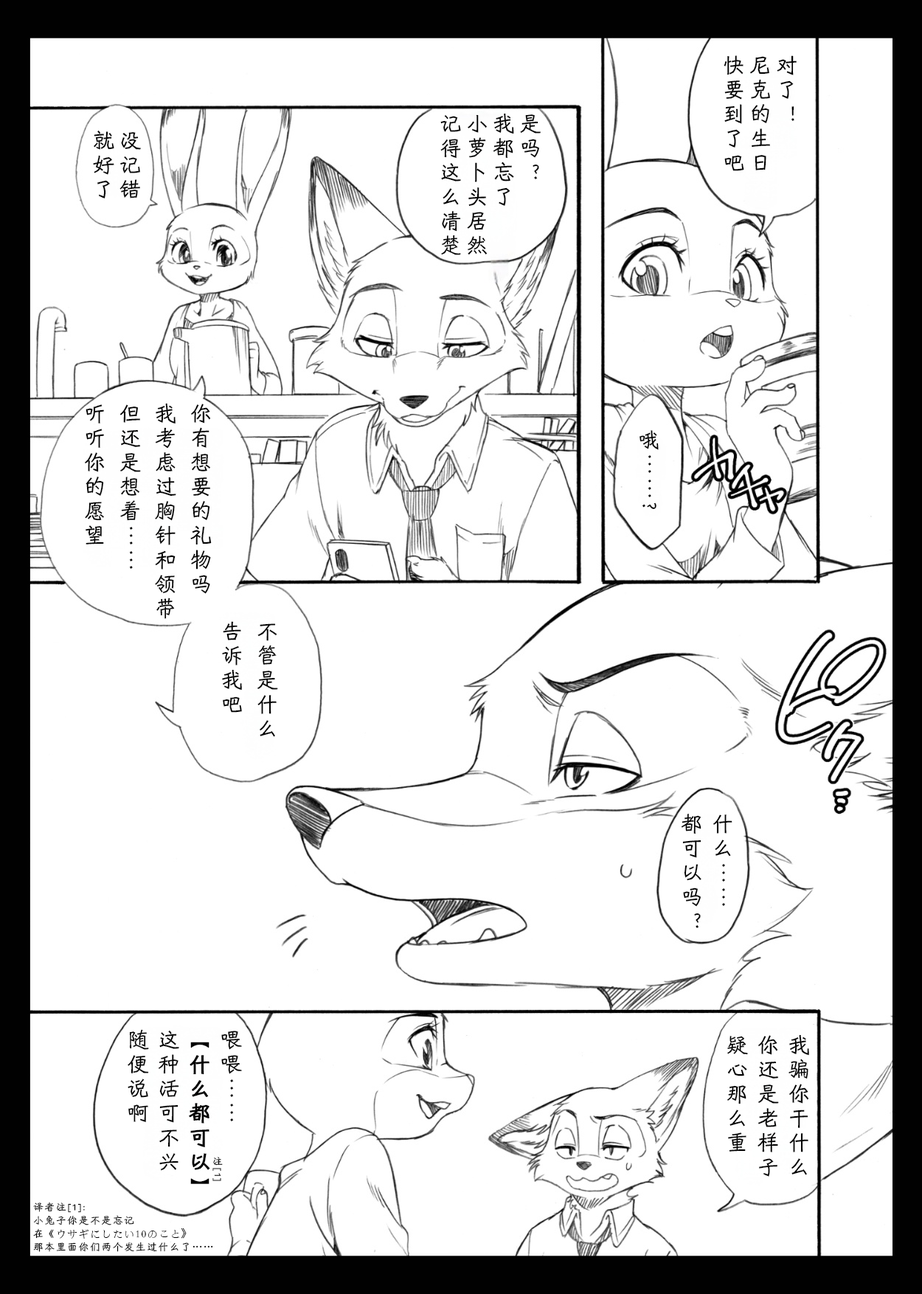
<style>
.page{position:relative;width:922px;height:1294px;background:#ffffff}
.page>*{position:absolute;margin:0}
.t1{font:22.1px/26.5px "HYShiWei55U";letter-spacing:0.1em;color:#000000}
.t2{font:22.1px/35.4px "HYShiWei55U";letter-spacing:0.1em;color:#000000}
.t3{font:22.1px/31px "HYShiWei55U";letter-spacing:0.1em;color:#000000}
.t4{font:22.1px/31px "HYShiWei55U";letter-spacing:0.1em;color:#000000;font-weight:bold}
.t5{font:10.3px/31px "HYShiWei55U";letter-spacing:0.1em;color:#000000}
.t6{font:10.3px/13.3px "HYShiWei55U";letter-spacing:0.1em;color:#000000}
.t7{font:10.3px/13.3px "STFangsong";letter-spacing:0.1em;color:#000000}
.t8{font:10.3px/13.3px "KozGoPr6N-Regular";letter-spacing:0.1em;color:#000000}
.t9{font:10.3px/13.3px "AdobeHeitiStd-Regular";letter-spacing:0.1em;color:#000000}
</style>
<div class="page">
<p class="t1" style="left:723px;top:55px;width:73px;height:116px">对了！<br>尼克的生日<br>快要到了吧</p>
<p class="t1" style="left:440px;top:113px;width:101px;height:142px">是吗？<br>我都忘了<br>小萝卜头居然<br>记得这么清楚</p>
<p class="t1" style="left:93px;top:131px;width:48px;height:67px">没记错<br>就好了</p>
<p class="t2" style="left:84px;top:403px;width:128px;height:216px">你有想要的礼物吗<br>我考虑过胸针和领带<br>但还是想着……<br>听听你的愿望</p>
<p class="t2" style="left:639px;top:430px;width:20px;height:79px">哦……?</p>
<p class="t2" style="left:222px;top:621px;width:56px;height:116px">不管是什么<br>告诉我吧</p>
<p class="t3" style="left:681px;top:813px;width:51px;height:115px">什么……<br>都可以吗？</p>
<p class="t3" style="left:128px;top:1029px;width:114px;height:155px">喂喂……<br><span class="t4">【什么都可以】<br></span>这种活可不兴<br>随便说啊</p>
<p class="t3" style="left:727px;top:1034px;width:82px;height:142px">我骗你干什么<br>你还是老样子<br>疑心那么重</p>
<p class="t5" style="left:212px;top:1156px;width:11px;height:25px">注[1]</p>
<p class="t6" style="left:33px;top:1201px;width:180px;height:50px">译者注[1]:<br>小兔子你是不是忘记<br>在《<span class="t7">ウサギにしたい10のこと</span><span class="t8">》<br></span>那本里面你们两个发生过什么了<span class="t9">……</span></p>
</div>
